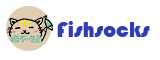
<style>
.page{position:relative;width:160px;height:60px;background:#ffffff}
.page>*{position:absolute;margin:0}
.t1{font:22.9px "Bauhaus93";color:#303cb8}
</style>
<div class="page">
<p class="t1" style="left:57px;top:21px;width:93px;height:16px">Fishsocks</p>
</div>
